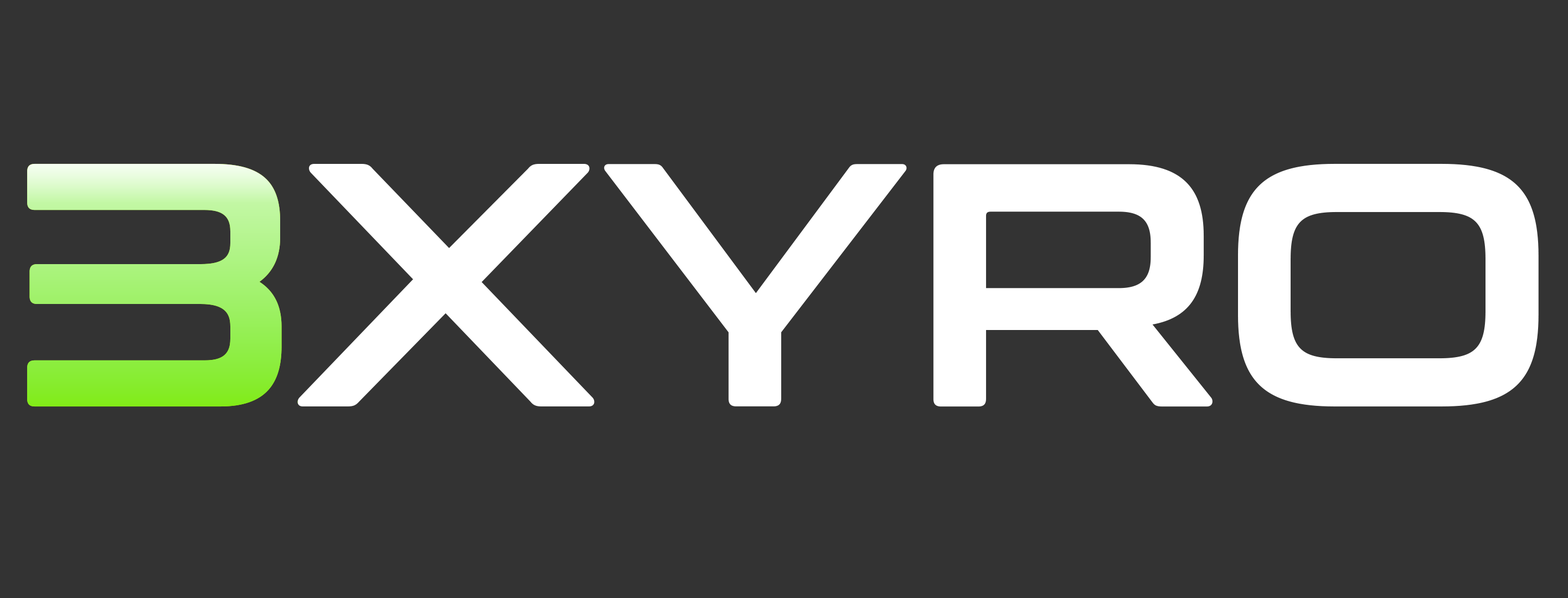
<style>
.page{position:relative;width:1568px;height:598px;background:#333333}
.page>*{position:absolute;margin:0}
.t1{font:346px "Conthrax-SemiBold";color:#ffffff}
.t2{font:346px "Conthrax-SemiBold";color:#b4ff01}
</style>
<div class="page">
<p class="t1" style="left:27px;top:163px;width:1512px;height:244px"><span class="t2">3</span>XYRO</p>
</div>
